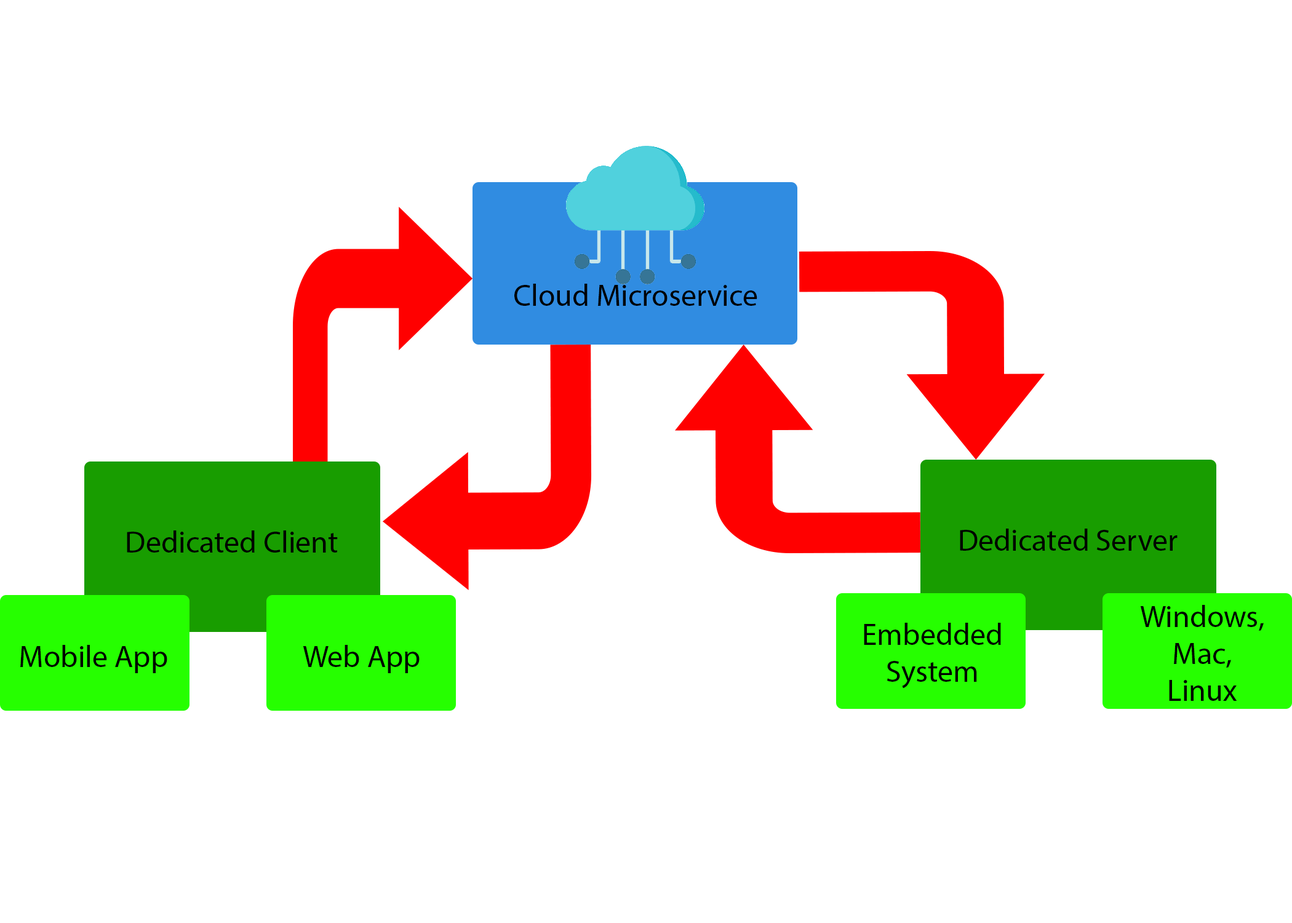
<style>
.page{position:relative;width:1292px;height:923px;background:#ffffff}
.page>*{position:absolute;margin:0}
.t1{font:30.8px "MyriadPro-Regular";color:#000000}
</style>
<div class="page">
<p class="t1" style="left:514px;top:284px;width:243px;height:22px">Cloud Microservice</p>
<p class="t1" style="left:127px;top:530px;width:211px;height:23px">Dedicated Client</p>
<p class="t1" style="left:960px;top:529px;width:218px;height:22px">Dedicated Server</p>
<p class="t1" style="left:1140px;top:605px;width:124px;height:96px;text-align:center">Windows,<br>Mac,<br>Linux</p>
<p class="t1" style="left:864px;top:623px;width:137px;height:65px;text-align:center">Embedded<br>System</p>
<p class="t1" style="left:20px;top:645px;width:147px;height:28px">Mobile App</p>
<p class="t1" style="left:303px;top:645px;width:117px;height:28px">Web App</p>
</div>
